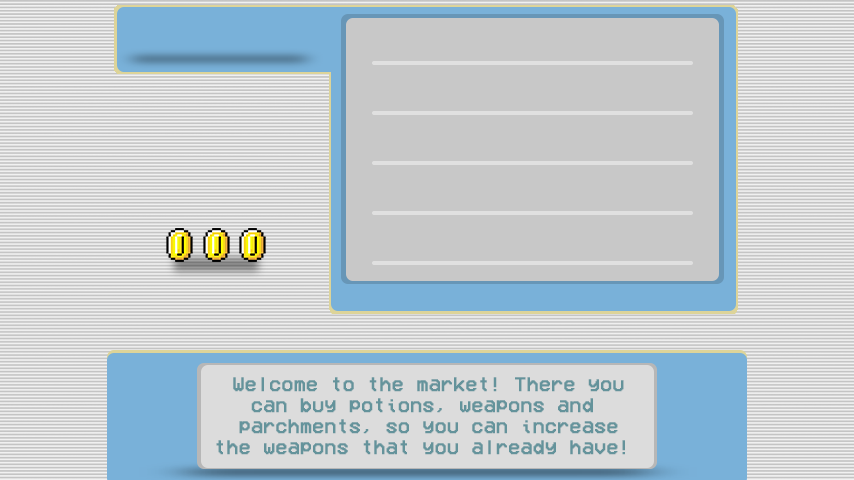
<style>
.page{position:relative;width:854px;height:480px;background:#c8c8c8}
.page>*{position:absolute;margin:0}
.t1{font:20px/21px "VCROSDMono";color:#64939b;font-weight:bold}
</style>
<div class="page">
<p class="t1" style="left:216px;top:377px;width:409px;height:78px;text-align:center">Welcome to the market! There you<br>can buy potions, weapons and <br>parchments, so you can increase<br>the weapons that you already have!</p>
</div>
